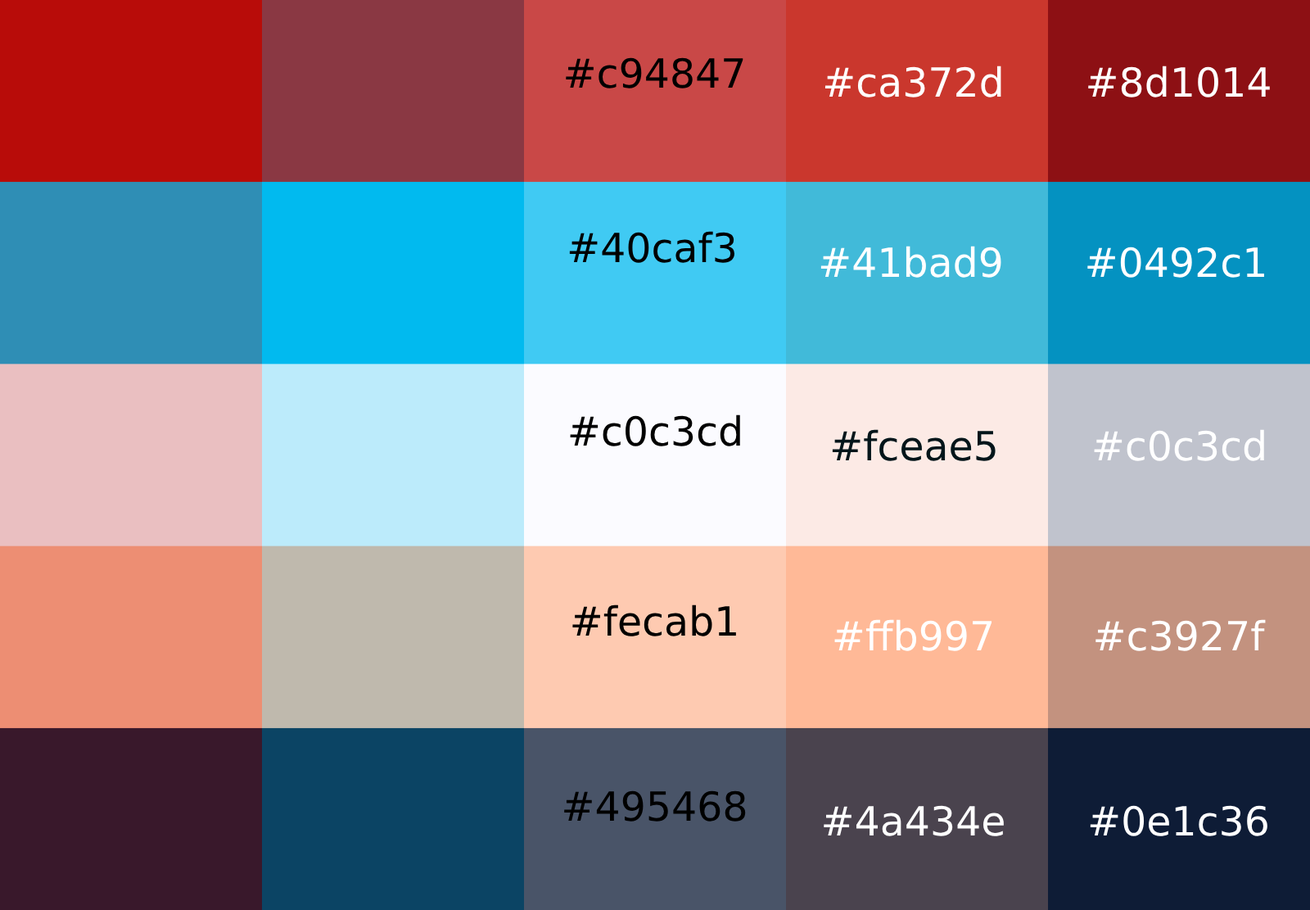
<style>
.page{position:relative;width:1310px;height:910px}
.page>*{position:absolute;margin:0}
.t1{font:40.1px "DejaVuSans";color:#000000}
.t2{font:40.1px "DejaVuSans";color:#ffffff}
.t3{font:40.1px "DejaVuSans";color:#03151a}
</style>
<div class="page">
<p class="t1" style="left:566px;top:57px;width:178px;height:31px">#c94847</p>
<p class="t2" style="left:825px;top:66px;width:177px;height:31px">#ca372d</p>
<p class="t2" style="left:1088px;top:66px;width:182px;height:31px">#8d1014</p>
<p class="t1" style="left:569px;top:231px;width:166px;height:32px">#40caf3</p>
<p class="t2" style="left:821px;top:246px;width:181px;height:32px">#41bad9</p>
<p class="t2" style="left:1088px;top:247px;width:177px;height:31px">#0492c1</p>
<p class="t1" style="left:570px;top:414px;width:170px;height:32px">#c0c3cd</p>
<p class="t3" style="left:832px;top:429px;width:164px;height:32px">#fceae5</p>
<p class="t2" style="left:1094px;top:429px;width:171px;height:32px">#c0c3cd</p>
<p class="t1" style="left:573px;top:604px;width:163px;height:32px">#fecab1</p>
<p class="t2" style="left:835px;top:619px;width:158px;height:32px">#ffb997</p>
<p class="t2" style="left:1096px;top:619px;width:170px;height:32px">#c3927f</p>
<p class="t1" style="left:564px;top:790px;width:182px;height:31px">#495468</p>
<p class="t2" style="left:824px;top:805px;width:180px;height:31px">#4a434e</p>
<p class="t2" style="left:1090px;top:805px;width:178px;height:31px">#0e1c36</p>
</div>
